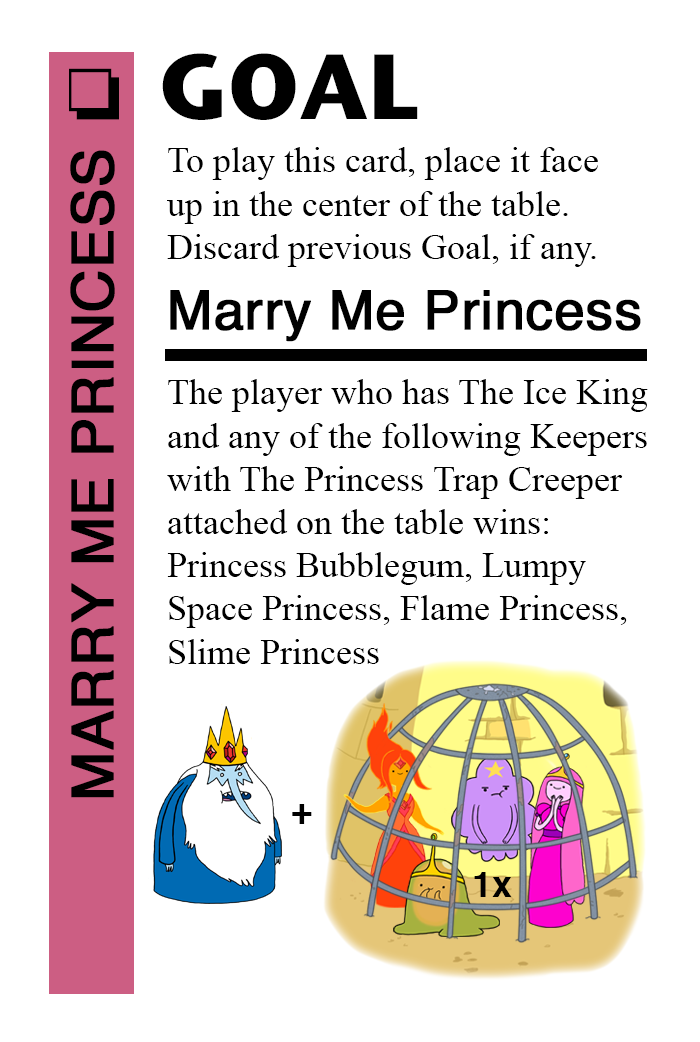
<style>
.page{position:relative;width:700px;height:1042px;background:#ffffff}
.page>*{position:absolute;margin:0}
.t1{font:92px "StoneSansITC-Bold";color:#000000}
.t2{font:72px "MS-Gothic";color:#000000}
.t3{font:58px "Helvetica";color:#000000;font-weight:bold}
.t4{font:36px "TimesNewRomanPSMT";color:#000000}
.t5{font:54px "Helvetica";color:#000000;font-weight:bold}
.t6{font:36px "Helvetica-Bold";color:#000000}
</style>
<div class="page">
<p class="t1" style="left:162px;top:53px;width:256px;height:67px">GOAL</p>
<p class="t2" style="left:69px;top:68px;width:50px;height:52px">❏</p>
<p class="t3" style="left:70px;top:150px;width:45px;height:648px;rotate:-90deg">MARRY ME PRINCESS</p>
<p class="t4" style="left:167px;top:147px;width:431px;height:120px">To play this card, place it face<br>up in the center of the table.<br>Discard previous Goal, if any.</p>
<p class="t5" style="left:170px;top:290px;width:471px;height:52px">Marry Me Princess</p>
<p class="t4" style="left:167px;top:379px;width:481px;height:285px">The player who has The Ice King<br>and any of the following Keepers<br>with The Princess Trap Creeper<br>attached on the table wins: <br>Princess Bubblegum, Lumpy <br>Space Princess, Flame Princess, <br>Slime Princess</p>
<p class="t6" style="left:292px;top:804px;width:20px;height:20px">+</p>
<p class="t6" style="left:474px;top:872px;width:38px;height:25px">1x</p>
</div>
